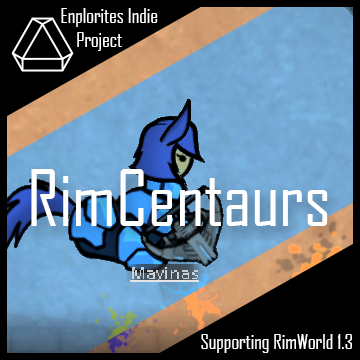
<style>
.page{position:relative;width:360px;height:360px;background:#000000}
.page>*{position:absolute;margin:0}
.t1{font:20px "AgencyFB-Reg";color:#ffffff}
.t2{font:75px "AgencyFB-Reg";color:#ffffff}
</style>
<div class="page">
<p class="t1" style="left:61px;top:8px;width:97px;height:43px">Enplorites Indie<br>    Project</p>
<p class="t2" style="left:31px;top:169px;width:297px;height:57px">RimCentaurs</p>
<p class="t1" style="left:201px;top:334px;width:151px;height:19px">Supporting RimWorld 1.3</p>
</div>
